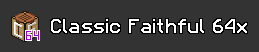
<style>
.page{position:relative;width:259px;height:52px;background:#333333}
.page>*{position:absolute;margin:0}
.t1{font:24px "ComplianceSans";color:#ffffff}
</style>
<div class="page">
<p class="t1" style="left:51px;top:19px;width:196px;height:14px">Classic Faithful 64x</p>
</div>
